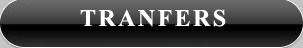
<style>
.page{position:relative;width:303px;height:48px}
.page>*{position:absolute;margin:0}
.t1{font:24px "TimesNewRomanPS-BoldMT";letter-spacing:0.1em;color:#ffffff}
</style>
<div class="page">
<p class="t1" style="left:80px;top:9px;width:146px;height:18px">TRANFERS</p>
</div>
